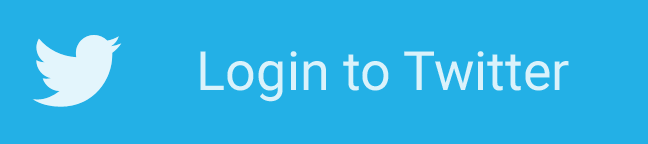
<style>
.page{position:relative;width:648px;height:144px;background:#23b0e6}
.page>*{position:absolute;margin:0}
.t1{font:54px "Roboto-Regular";color:#daf2fb}
</style>
<div class="page">
<p class="t1" style="left:200px;top:51px;width:369px;height:51px">Login to Twitter</p>
</div>
